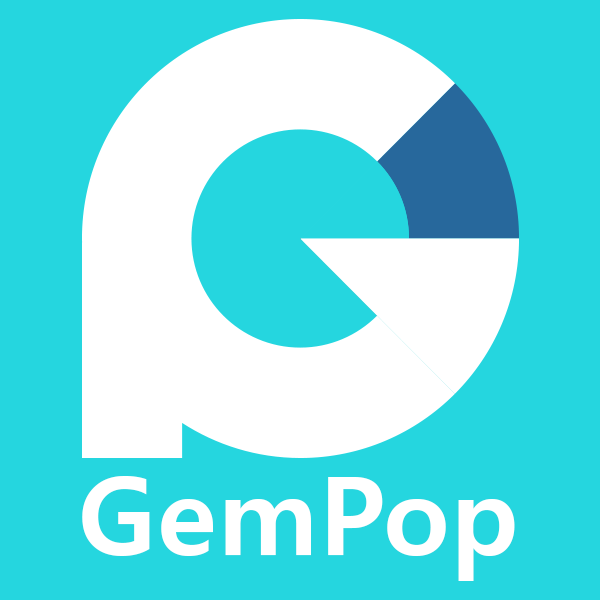
<style>
.page{position:relative;width:600px;height:600px;background:#25d6df}
.page>*{position:absolute;margin:0}
.t1{font:108.2px "MalgunGothicBold";letter-spacing:0.01em;color:#ffffff}
</style>
<div class="page">
<p class="t1" style="left:82px;top:476px;width:433px;height:105px">GemPop</p>
</div>
